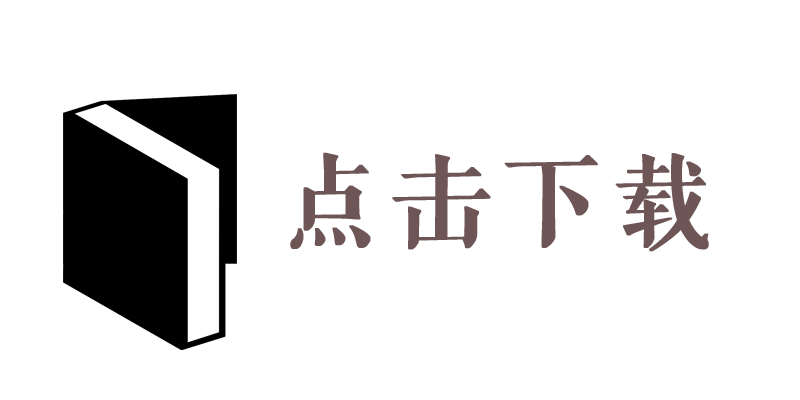
<style>
.page{position:relative;width:800px;height:400px;background:#ffffff}
.page>*{position:absolute;margin:0}
.t1{font:100px "FZQKBYSJW--GB1-0";letter-spacing:0.075em;color:#6f5656;font-weight:bold}
</style>
<div class="page">
<p class="t1" style="left:290px;top:152px;width:419px;height:100px">点击下载</p>
</div>
